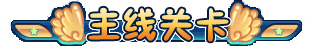
<style>
.page{position:relative;width:314px;height:49px;background:#ffffff}
.page>*{position:absolute;margin:0}
.t1{font:62px "FZSEJW--GB1-0";letter-spacing:-0.02em;font-variant:small-caps;font-weight:bold}
</style>
<div class="page">
<p class="t1" style="left:88px;top:7px;width:141px;height:35px">主线关卡</p>
</div>
